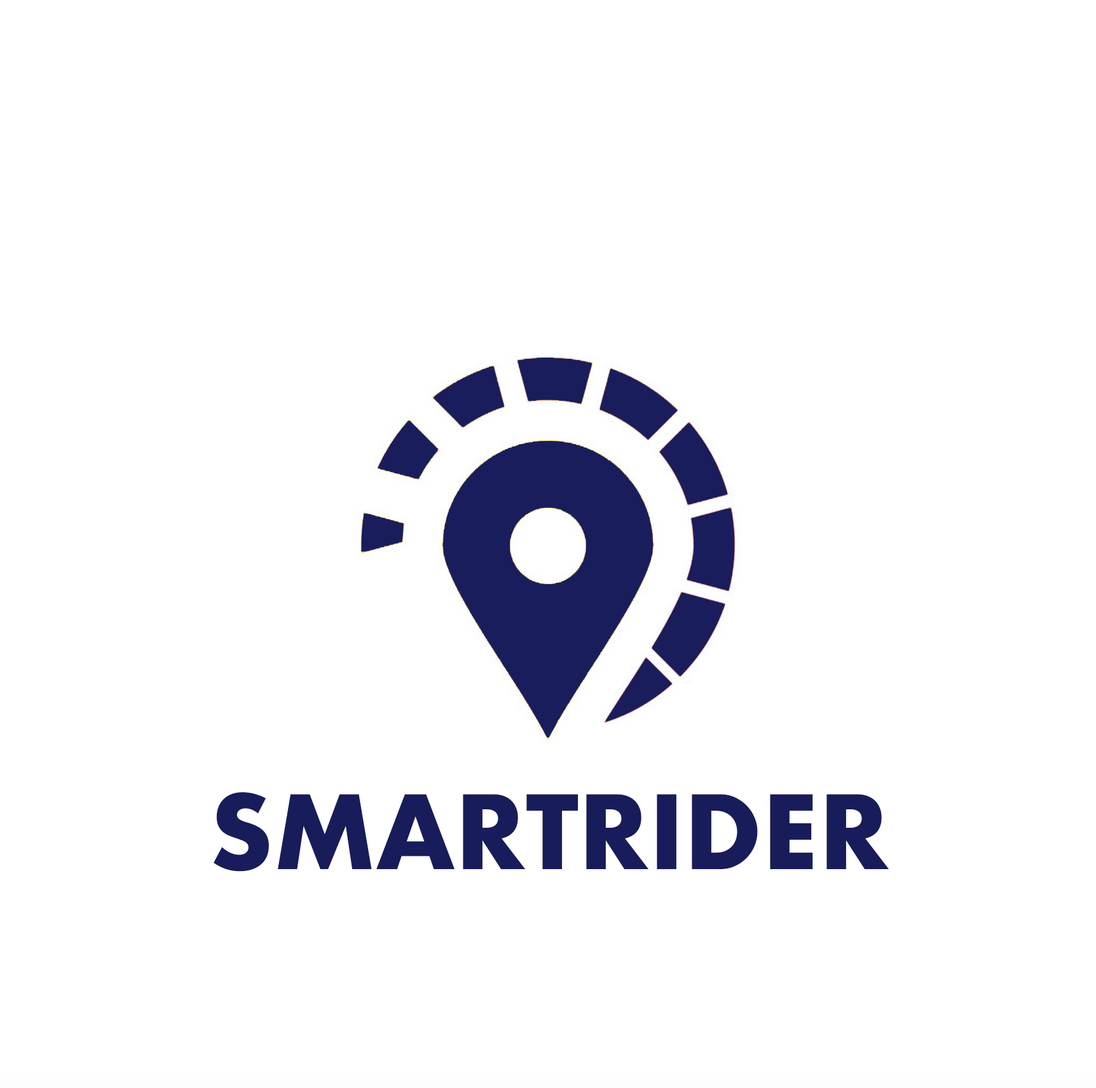
<style>
.page{position:relative;width:1096px;height:1088px;background:#ffffff}
.page>*{position:absolute;margin:0}
.t1{font:99.2px "Futura-Bold";color:#181c5a}
</style>
<div class="page">
<p class="t1" style="left:214px;top:792px;width:676px;height:79px">SMARTRIDER</p>
</div>
